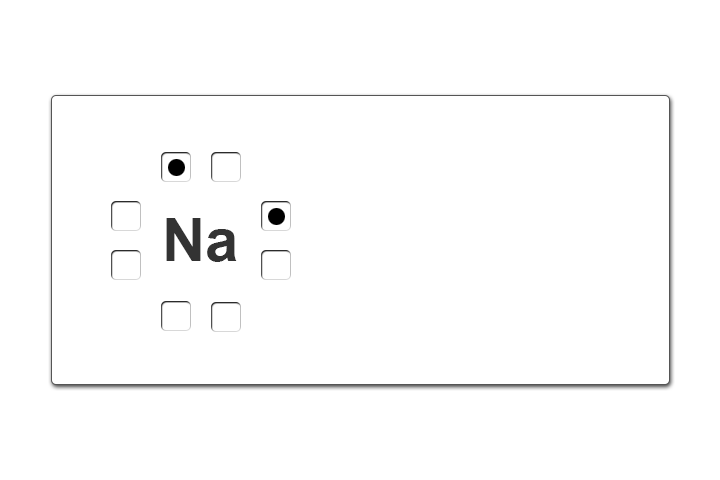
<style>
.page{position:relative;width:720px;height:480px;background:#ffffff}
.page>*{position:absolute;margin:0}
.t1{font:60px "Arial-BoldMT";color:#333333}
</style>
<div class="page">
<p class="t1" style="left:166px;top:218px;width:71px;height:44px">Na</p>
</div>
